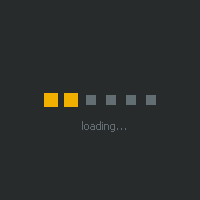
<style>
.page{position:relative;width:200px;height:200px;background:#272b2c}
.page>*{position:absolute;margin:0}
.t1{font:11px "Tahoma";color:#626e71}
</style>
<div class="page">
<p class="t1" style="left:82px;top:121px;width:44px;height:11px">loading...</p>
</div>
